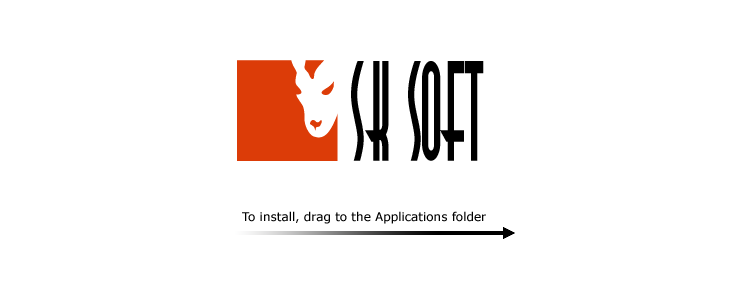
<style>
.page{position:relative;width:740px;height:300px;background:#ffffff}
.page>*{position:absolute;margin:0}
.t1{font:12px "Verdana";color:#000000}
</style>
<div class="page">
<p class="t1" style="left:242px;top:211px;width:244px;height:13px">To install, drag to the Applications folder</p>
</div>
